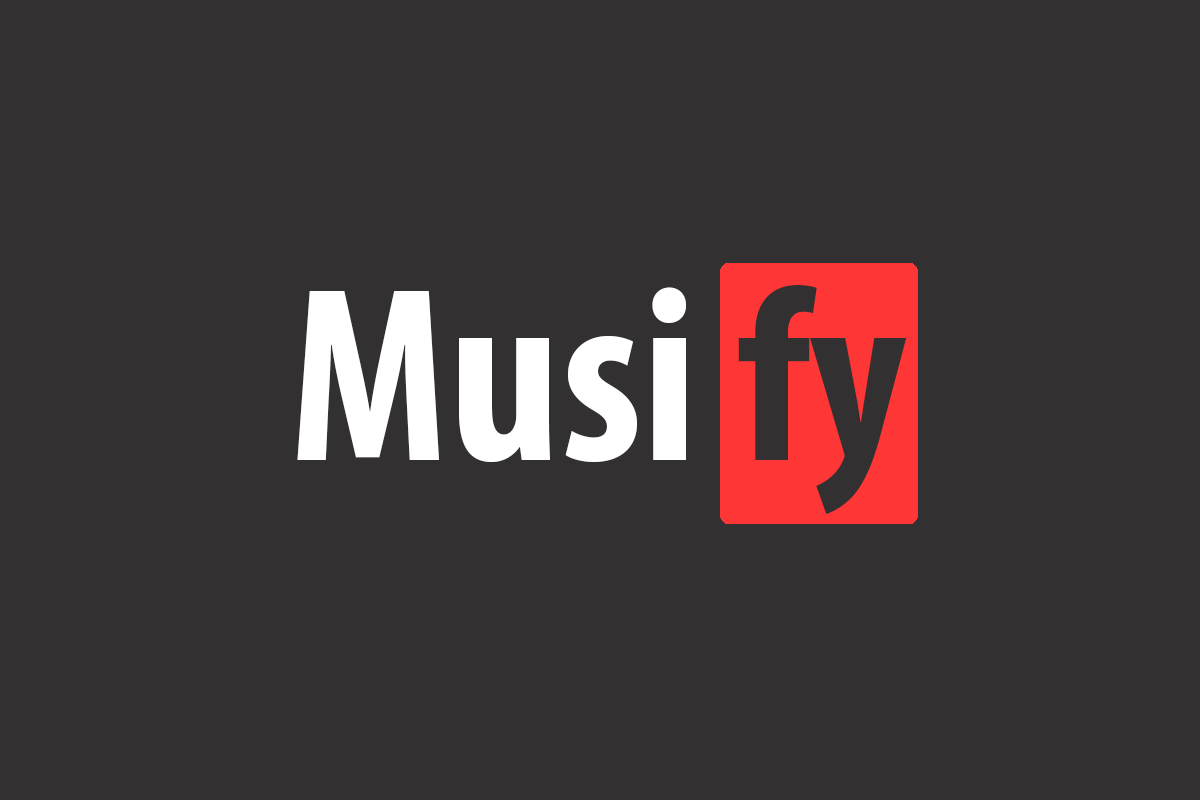
<style>
.page{position:relative;width:1200px;height:800px;background:#323030}
.page>*{position:absolute;margin:0}
.t1{font:250px "MyriadPro-BoldCond";color:#ffffff}
.t2{font:250px "MyriadPro-BoldCond";color:#323030}
</style>
<div class="page">
<p class="t1" style="left:297px;top:285px;width:610px;height:230px">Musi <span class="t2">fy</span></p>
</div>
